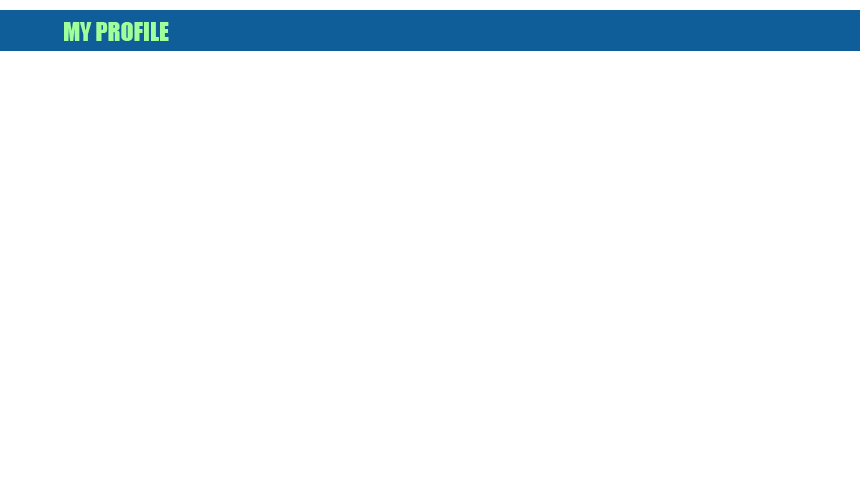
<style>
.page{position:relative;width:860px;height:500px;background:#ffffff}
.page>*{position:absolute;margin:0}
.t1{font:24px "Impact";color:#9fff9a}
</style>
<div class="page">
<p class="t1" style="left:64px;top:22px;width:105px;height:19px">MY PROFILE</p>
</div>
